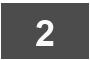
<style>
.page{position:relative;width:90px;height:60px;background:#4c4c4c}
.page>*{position:absolute;margin:0}
.t1{font:36px "Arial-BoldMT";color:#fafafa}
</style>
<div class="page">
<p class="t1" style="left:36px;top:20px;width:18px;height:26px">2</p>
</div>
